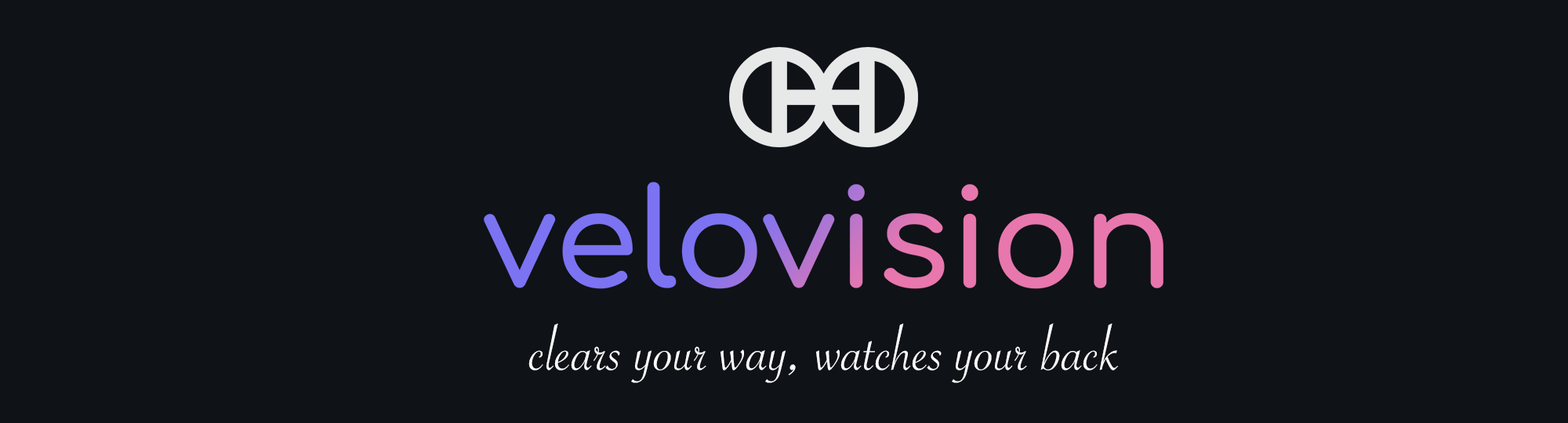
<style>
.page{position:relative;width:1568px;height:423px;background:#0f1217}
.page>*{position:absolute;margin:0}
.t1{font:67.4px "SavoyeLetPlain";color:#ffffff}
</style>
<div class="page">
<p class="t1" style="left:528px;top:323px;width:590px;height:60px">clears your way, watches your back</p>
</div>
